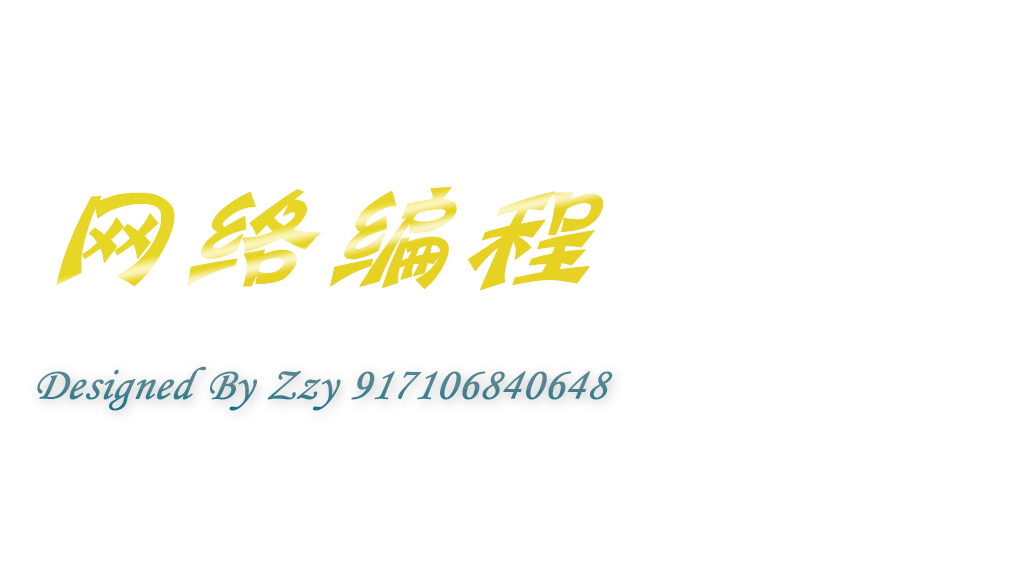
<style>
.page{position:relative;width:1024px;height:580px;background:#ffffff}
.page>*{position:absolute;margin:0}
.t1{font:125px "HYn3gj";color:#e8d626;font-weight:bold;scale:1.09 1}
.t2{font:45.8px "STLiti";font-weight:bold;font-style:italic}
</style>
<div class="page">
<p class="t1" style="left:56px;top:186px;width:548px;height:105px">网络编程</p>
<p class="t2" style="left:37px;top:366px;width:576px;height:45px">Designed By Zzy 917106840648</p>
</div>
